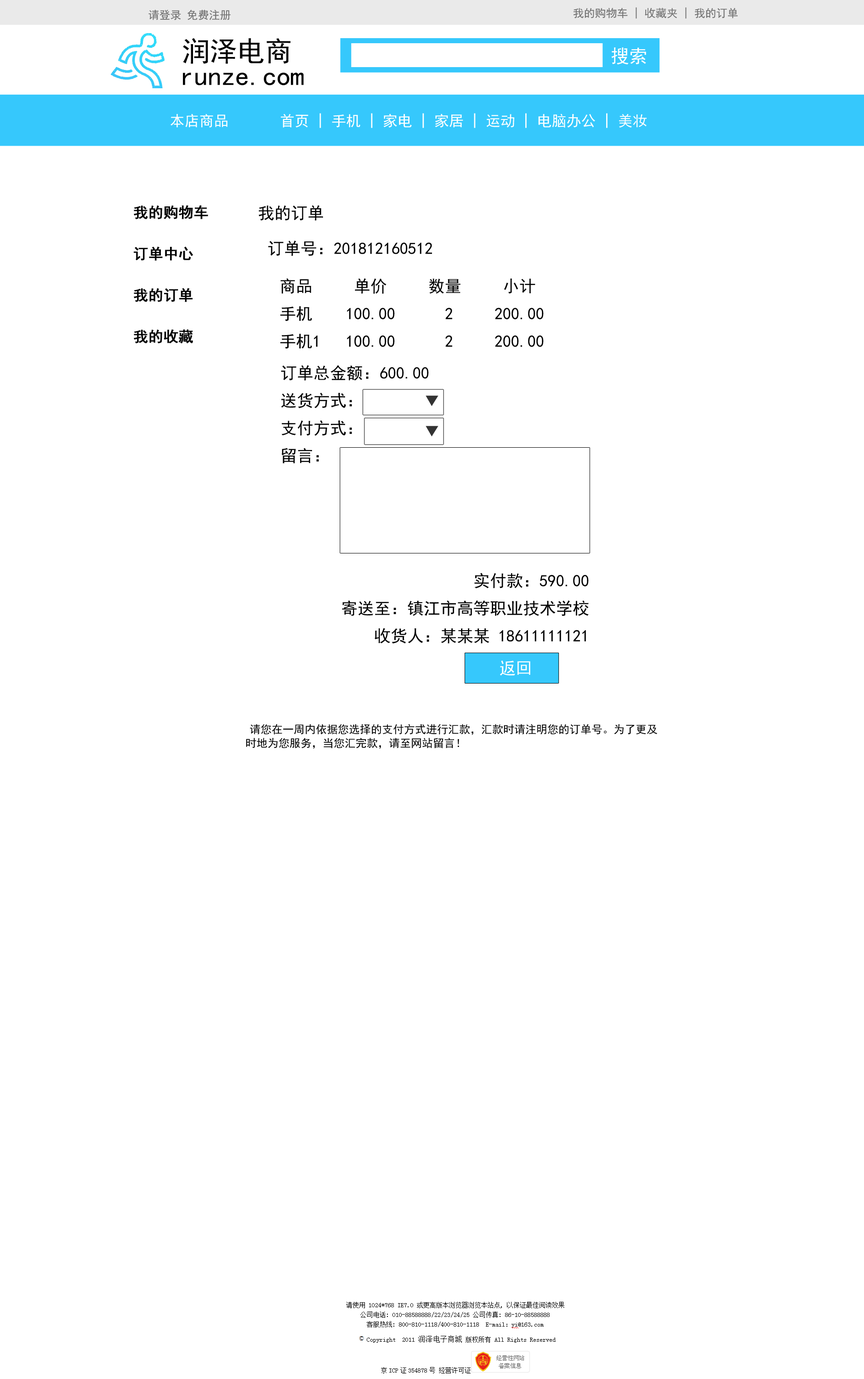
<style>
.page{position:relative;width:864px;height:1379px;background:#ffffff}
.page>*{position:absolute;margin:0}
.t1{font:11px "SimHei";color:#6f6f6f}
.t2{font:27.6px "SimHei";color:#010101}
.t3{font:18.4px "SimHei";color:#ffffff}
.t4{font:14.7px "SimHei";color:#ffffff}
.t5{font:14.7px/13.8px "SimHei";color:#000000;font-weight:bold}
.t6{font:16.6px "SimHei";color:#000000}
.t7{font:16.6px/13.8px "SimHei";color:#000000}
.t8{font:16.6px "SimHei";color:#333333}
.t9{font:16.6px "SimHei";color:#ffffff}
.t10{font:11px/13.8px "SimHei";color:#000000}
</style>
<div class="page">
<p class="t1" style="left:149px;top:10px;width:82px;height:10px">请登录 免费注册</p>
<p class="t1" style="left:573px;top:7px;width:165px;height:12px">我的购物车 | 收藏夹 | 我的订单</p>
<p class="t2" style="left:183px;top:38px;width:108px;height:26px">润泽电商</p>
<p class="t3" style="left:612px;top:47px;width:34px;height:18px">搜索</p>
<p class="t2" style="left:183px;top:73px;width:121px;height:13px">runze.com</p>
<p class="t4" style="left:170px;top:113px;width:477px;height:15px">本店商品       首页 | 手机 | 家电 | 家居 | 运动 | 电脑办公 | 美妆</p>
<p class="t5" style="left:134px;top:205px;width:74px;height:138px">我的购物车<br><br><br>订单中心<br><br><br>我的订单<br><br><br>我的收藏</p>
<p class="t6" style="left:259px;top:205px;width:64px;height:16px">我的订单</p>
<p class="t6" style="left:268px;top:240px;width:164px;height:16px">订单号：201812160512</p>
<p class="t7" style="left:280px;top:278px;width:264px;height:71px">商品     单价     数量     小计 <br><br>手机    100.00      2     200.00<br><br>手机1   100.00      2     200.00</p>
<p class="t7" style="left:281px;top:365px;width:148px;height:98px">订单总金额：600.00<br><br>送货方式：<br><br>支付方式：<br><br>留言：</p>
<p class="t8" style="left:426px;top:395px;width:13px;height:11px">▼</p>
<p class="t8" style="left:426px;top:426px;width:13px;height:11px">▼</p>
<p class="t7" style="left:342px;top:573px;width:247px;height:71px;text-align:right">实付款：590.00<br><br>寄送至：镇江市高等职业技术学校<br><br>收货人：某某某 18611111121</p>
<p class="t9" style="left:500px;top:661px;width:31px;height:15px">返回</p>
<p class="t10" style="left:246px;top:724px;width:412px;height:25px">请您在一周内依据您选择的支付方式进行汇款，汇款时请注明您的订单号。为了更及时地为您服务，当您汇完款，请至网站留言！</p>
</div>
